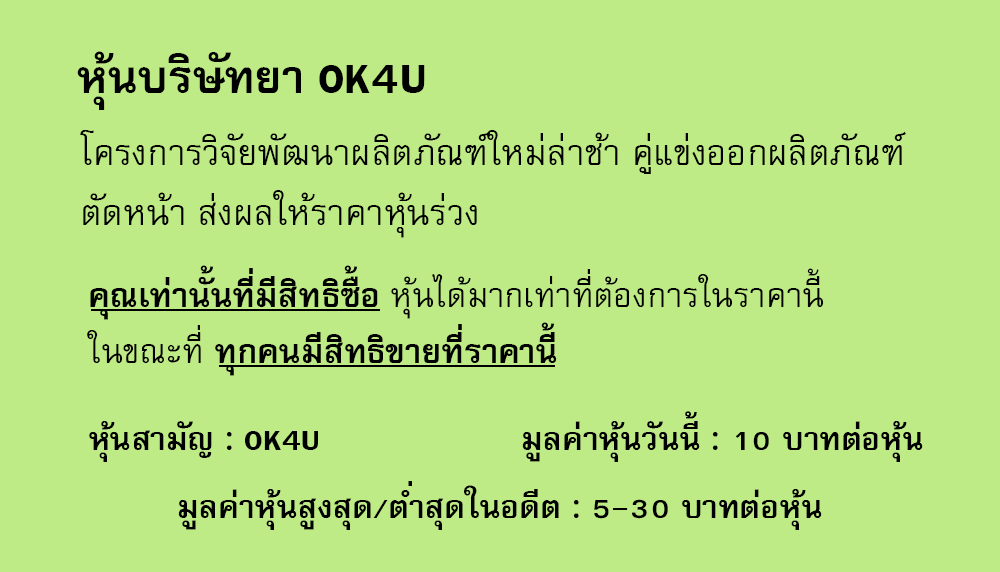
<style>
.page{position:relative;width:1000px;height:572px;background:#beeb85}
.page>*{position:absolute;margin:0}
.t1{font:64px "FreesiaUPCBold";color:#000000}
.t2{font:50px/60px "FreesiaUPC";color:#000000}
.t3{font:47px "FreesiaUPC";color:#000000}
.t4{font:47px "FreesiaUPCBold";color:#000000}
.t5{font:45px "FreesiaUPCBold";color:#000000}
</style>
<div class="page">
<p class="t1" style="left:77px;top:51px;width:348px;height:59px">หุ้นบริษัทยา OK4U</p>
<p class="t2" style="left:80px;top:130px;width:826px;height:108px">โครงการวิจัยพัฒนาผลิตภัณฑ์ใหม่ล่าช้า คู่แข่งออกผลิตภัณฑ์<br>ตัดหน้า ส่งผลให้ราคาหุ้นร่วง</p>
<p class="t3" style="left:87px;top:265px;width:737px;height:111px"><span class="t4">คุณเท่านั้นที่มีสิทธิซื้อ </span>หุ้นได้มากเท่าที่ต้องการในราคานี้<br>ในขณะที่<span class="t4"> ทุกคนมีสิทธิขายที่ราคานี้</span></p>
<p class="t5" style="left:522px;top:411px;width:401px;height:51px">มูลค่าหุ้นวันนี้ : 10 บาทต่อหุ้น</p>
<p class="t5" style="left:89px;top:421px;width:229px;height:41px">หุ้นสามัญ : OK4U</p>
<p class="t5" style="left:178px;top:481px;width:644px;height:49px">มูลค่าหุ้นสูงสุด/ต่ำสุดในอดีต : 5-30 บาทต่อหุ้น</p>
</div>
